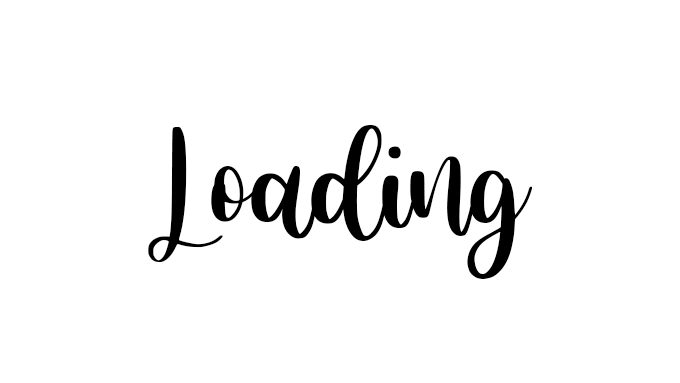
<style>
.page{position:relative;width:680px;height:383px;background:#ffffff}
.page>*{position:absolute;margin:0}
.t1{font:191.8px "GoldieRainbow";color:#000000}
</style>
<div class="page">
<p class="t1" style="left:148px;top:125px;width:384px;height:154px">Loading</p>
</div>
